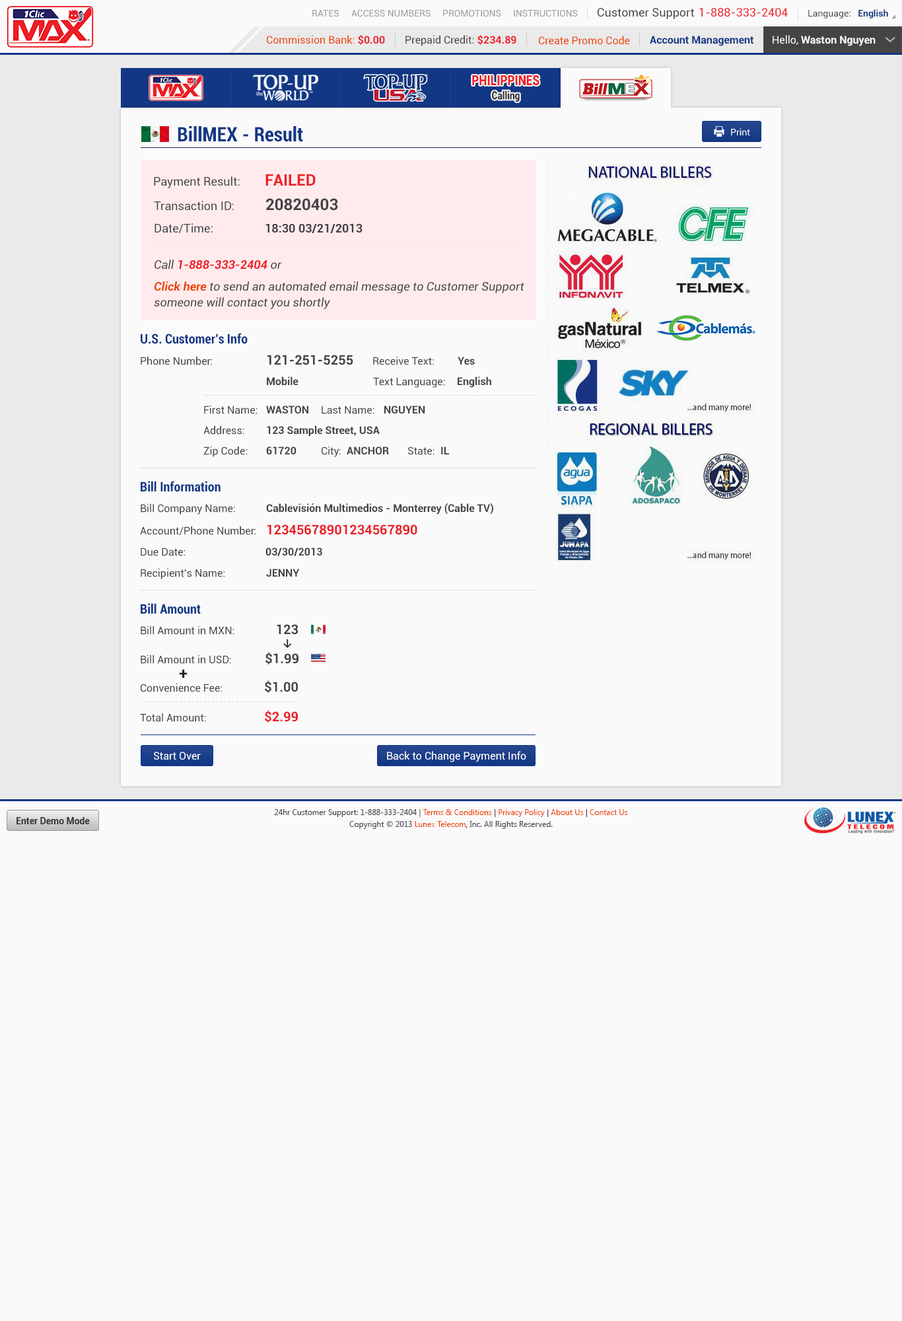
<style>
.page{position:relative;width:902px;height:1321px;background:#fafafa}
.page>*{position:absolute;margin:0}
.t1{font:9.2px "Roboto-Regular";color:#999999}
.t2{font:11.6px "Roboto-Regular";color:#444444}
.t3{font:11.6px "Roboto-Regular";color:#ec2029}
.t4{font:9.2px "Roboto-Regular";color:#444444}
.t5{font:9.2px "Roboto-Bold";color:#123785}
.t6{font:10.6px "Roboto-Regular";color:#ee4400}
.t7{font:10.6px "Roboto-Bold";color:#ec2028}
.t8{font:10.6px "Roboto-Regular";color:#444444}
.t9{font:10.6px "Roboto-Bold";color:#123785}
.t10{font:10.6px "Roboto-Bold";color:#fafafa}
.t11{font:10.6px "Roboto-Regular";color:#fafafa}
.t12{font:14.1px "Roboto-Black";color:#ec2028;scale:0.81 1}
.t13{font:11.3px "Roboto-Black";color:#333333;scale:0.81 1}
.t14{font:19.8px "Roboto-BoldCondensed";color:#123785}
.t15{font:9.2px "Roboto-Regular";color:#fafafa}
.t16{font:15.9px "Roboto-Bold";color:#ec222a}
.t17{font:11.9px "Roboto-Regular";color:#444444}
.t18{font:15.9px "Roboto-Bold";color:#444444}
.t19{font:11.9px "Roboto-Bold";color:#444444}
.t20{font:11.9px "Roboto-BoldItalic";color:#ec222a}
.t21{font:11.9px "Roboto-Italic";color:#444444}
.t22{font:11.9px/15.9px "Roboto-Italic";color:#444444}
.t23{font:11.9px/15.9px "Roboto-BoldItalic";color:#ee4400}
.t24{font:13.2px "Roboto-BoldCondensed";color:#123785}
.t25{font:13.2px "Roboto-Bold";color:#444444}
.t26{font:10.6px "Roboto-Bold";color:#444444}
.t27{font:13.2px "Roboto-Bold";color:#ec2028}
.t28{font:10.6px "Calibri-Bold";color:#222222}
.t29{font:15.9px "Roboto-Bold";color:#222222}
.t30{font:10.6px "Roboto-Regular";color:#ffffff}
.t31{font:7.9px/11.9px "SegoeUI";color:#444444}
.t32{font:7.9px/11.9px "SegoeUI";color:#ee4400}
.t33{font:7.9px/11.9px "SegoeUI";color:#333333}
.t34{font:9.2px "Roboto-Bold";color:#333333}
</style>
<div class="page">
<p class="t1" style="left:312px;top:10px;width:27px;height:7px">RATES</p>
<p class="t1" style="left:351px;top:10px;width:80px;height:7px">ACCESS NUMBERS</p>
<p class="t1" style="left:443px;top:10px;width:58px;height:7px">PROMOTIONS</p>
<p class="t1" style="left:514px;top:10px;width:64px;height:7px">INSTRUCTIONS</p>
<p class="t2" style="left:598px;top:8px;width:96px;height:11px">Customer Support</p>
<p class="t3" style="left:700px;top:8px;width:88px;height:9px">1-888-333-2404</p>
<p class="t4" style="left:809px;top:9px;width:80px;height:9px">Language:   <span class="t5">English</span></p>
<p class="t6" style="left:267px;top:35px;width:118px;height:10px">Commission Bank: <span class="t7">$0.00</span></p>
<p class="t8" style="left:406px;top:35px;width:111px;height:11px">Prepaid Credit: <span class="t7">$234.89</span></p>
<p class="t6" style="left:539px;top:36px;width:91px;height:9px">Create Promo Code</p>
<p class="t9" style="left:650px;top:36px;width:104px;height:10px">Account Management</p>
<p class="t10" style="left:773px;top:35px;width:103px;height:11px"><span class="t11">Hello, </span>Waston Nguyen</p>
<p class="t12" style="left:472px;top:75px;width:68px;height:11px">PHILIPPINES</p>
<p class="t13" style="left:492px;top:91px;width:28px;height:11px">Calling</p>
<p class="t14" style="left:178px;top:126px;width:125px;height:16px">BillMEX - Result</p>
<p class="t15" style="left:731px;top:128px;width:20px;height:7px">Print</p>
<p class="t16" style="left:266px;top:174px;width:50px;height:12px">FAILED</p>
<p class="t17" style="left:154px;top:176px;width:86px;height:12px">Payment Result:</p>
<p class="t17" style="left:154px;top:201px;width:80px;height:10px">Transaction ID:</p>
<p class="t18" style="left:266px;top:198px;width:72px;height:13px">20820403</p>
<p class="t17" style="left:155px;top:223px;width:58px;height:10px">Date/Time:</p>
<p class="t19" style="left:266px;top:223px;width:97px;height:10px">18:30 03/21/2013</p>
<p class="t20" style="left:155px;top:260px;width:127px;height:10px"><span class="t21">Call </span>1-888-333-2404<span class="t21"> or</span></p>
<p class="t22" style="left:154px;top:281px;width:371px;height:28px"><span class="t23">Click here</span> to send an automated email message to Customer Support<br>someone will contact you shortly</p>
<p class="t24" style="left:141px;top:333px;width:107px;height:11px">U.S. Customer’s Info</p>
<p class="t8" style="left:141px;top:356px;width:71px;height:9px">Phone Number:</p>
<p class="t25" style="left:268px;top:355px;width:85px;height:10px">121-251-5255</p>
<p class="t8" style="left:373px;top:356px;width:61px;height:9px">Receive Text:</p>
<p class="t26" style="left:458px;top:357px;width:17px;height:8px">Yes</p>
<p class="t26" style="left:267px;top:377px;width:32px;height:9px">Mobile</p>
<p class="t8" style="left:373px;top:377px;width:72px;height:11px">Text Language:</p>
<p class="t26" style="left:458px;top:377px;width:34px;height:11px">English</p>
<p class="t8" style="left:204px;top:405px;width:54px;height:9px">First Name:</p>
<p class="t26" style="left:266px;top:406px;width:43px;height:8px">WASTON</p>
<p class="t8" style="left:322px;top:406px;width:53px;height:8px">Last Name:</p>
<p class="t26" style="left:385px;top:406px;width:40px;height:8px">NGUYEN</p>
<p class="t8" style="left:203px;top:425px;width:41px;height:10px">Address:</p>
<p class="t26" style="left:267px;top:425px;width:113px;height:12px">123 Sample Street, USA</p>
<p class="t8" style="left:203px;top:446px;width:44px;height:11px">Zip Code:</p>
<p class="t26" style="left:266px;top:447px;width:31px;height:8px">61720</p>
<p class="t8" style="left:322px;top:446px;width:19px;height:11px">City:</p>
<p class="t26" style="left:347px;top:447px;width:42px;height:8px">ANCHOR</p>
<p class="t8" style="left:408px;top:447px;width:27px;height:8px">State:</p>
<p class="t26" style="left:441px;top:447px;width:9px;height:8px">IL</p>
<p class="t24" style="left:141px;top:481px;width:80px;height:11px">Bill Information</p>
<p class="t8" style="left:141px;top:503px;width:94px;height:12px">Bill Company Name:</p>
<p class="t26" style="left:266px;top:503px;width:228px;height:12px">Cablevisión Multimedios - Monterrey (Cable TV)</p>
<p class="t8" style="left:140px;top:526px;width:116px;height:10px">Account/Phone Number:</p>
<p class="t27" style="left:268px;top:525px;width:150px;height:10px">12345678901234567890</p>
<p class="t8" style="left:141px;top:548px;width:45px;height:8px">Due Date:</p>
<p class="t26" style="left:266px;top:548px;width:56px;height:8px">03/30/2013</p>
<p class="t8" style="left:141px;top:568px;width:84px;height:11px">Recipient’s Name:</p>
<p class="t26" style="left:266px;top:569px;width:34px;height:8px">JENNY</p>
<p class="t24" style="left:141px;top:603px;width:60px;height:11px">Bill Amount</p>
<p class="t8" style="left:141px;top:626px;width:94px;height:9px">Bill Amount in MXN:</p>
<p class="t25" style="left:277px;top:624px;width:22px;height:11px">123</p>
<p class="t28" style="left:283px;top:639px;width:8px;height:9px">↓</p>
<p class="t25" style="left:266px;top:652px;width:33px;height:13px">$1.99</p>
<p class="t8" style="left:141px;top:655px;width:90px;height:9px">Bill Amount in USD:</p>
<p class="t29" style="left:179px;top:669px;width:9px;height:9px">+</p>
<p class="t8" style="left:141px;top:683px;width:81px;height:9px">Convenience Fee:</p>
<p class="t25" style="left:265px;top:680px;width:33px;height:13px">$1.00</p>
<p class="t8" style="left:140px;top:713px;width:66px;height:9px">Total Amount:</p>
<p class="t27" style="left:265px;top:710px;width:33px;height:13px">$2.99</p>
<p class="t30" style="left:154px;top:752px;width:47px;height:8px">Start Over</p>
<p class="t30" style="left:387px;top:751px;width:140px;height:11px">Back to Change Payment Info</p>
<p class="t31" style="left:274px;top:809px;width:354px;height:20px;text-align:center">24hr Customer Support: 1-888-333-2404 | <span class="t32">Terms &amp; Conditions</span><span class="t33"> | </span><span class="t32">Privacy Policy</span><span class="t33"> | </span><span class="t32">About Us</span><span class="t33"> | </span><span class="t32">Contact Us<br></span>Copyright © 2013 <span class="t32">Lunex Telecom</span><span class="t33">,</span> Inc. All Rights Reserved.</p>
<p class="t34" style="left:17px;top:817px;width:73px;height:8px">Enter Demo Mode</p>
</div>
